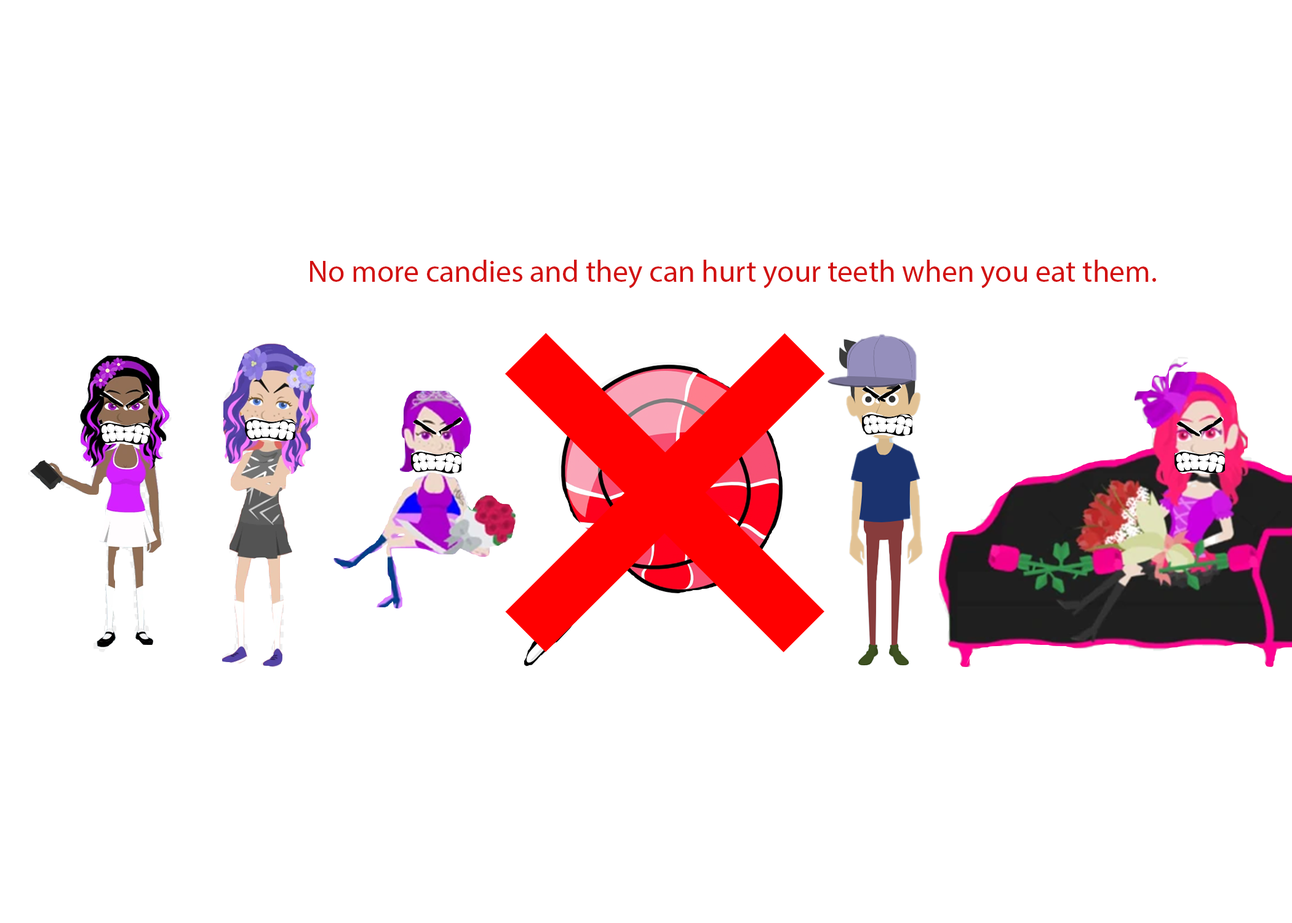
<style>
.page{position:relative;width:1292px;height:923px;background:#ffffff}
.page>*{position:absolute;margin:0}
.t1{font:30.8px "MyriadPro-Regular";color:#d21111}
</style>
<div class="page">
<p class="t1" style="left:310px;top:260px;width:846px;height:29px">No more candies and they can hurt your teeth when you eat them.</p>
</div>
